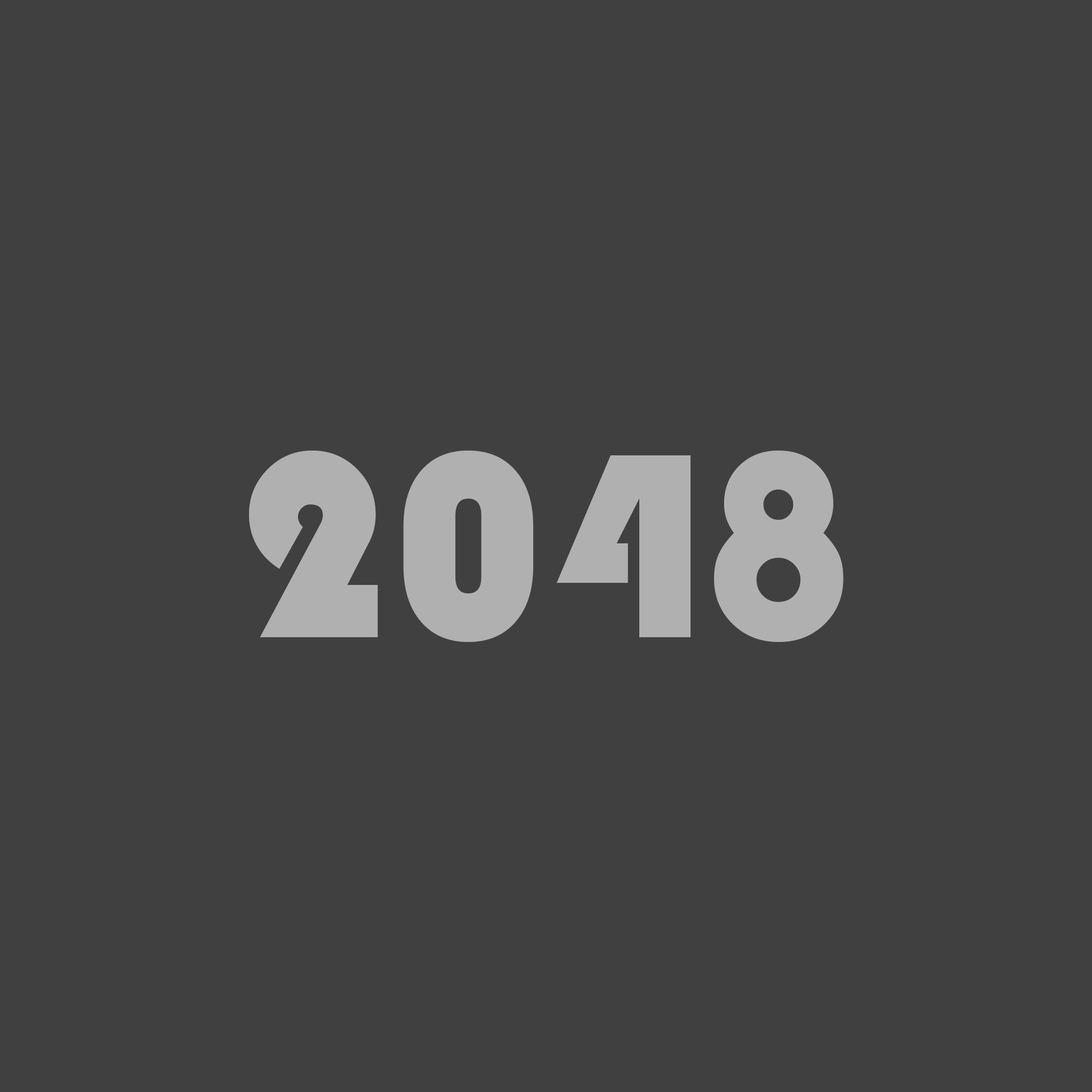
<style>
.page{position:relative;width:1092px;height:1092px;background:#404040}
.page>*{position:absolute;margin:0}
.t1{font:273px "Bauhaus93";color:#b1b0b0}
</style>
<div class="page">
<p class="t1" style="left:249px;top:451px;width:595px;height:191px">2048</p>
</div>
